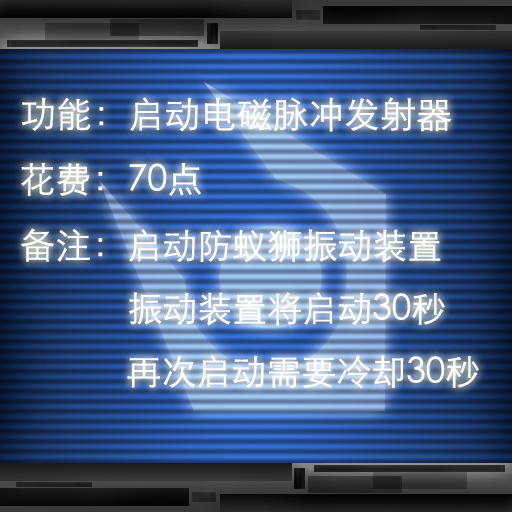
<style>
.page{position:relative;width:512px;height:512px}
.page>*{position:absolute;margin:0}
.t1{font:36px "STXihei";color:#ffffff}
.t2{font:35px "STXihei";color:#ffffff}
</style>
<div class="page">
<p class="t1" style="left:21px;top:97px;width:431px;height:35px">功能：启动电磁脉冲发射器</p>
<p class="t1" style="left:21px;top:163px;width:180px;height:33px">花费：70点</p>
<p class="t2" style="left:20px;top:228px;width:459px;height:161px"><span class="t1">备注：</span>启动防蚁狮振动装置<br>            振动装置将启动30秒<br>            再次启动需要冷却30秒</p>
</div>
